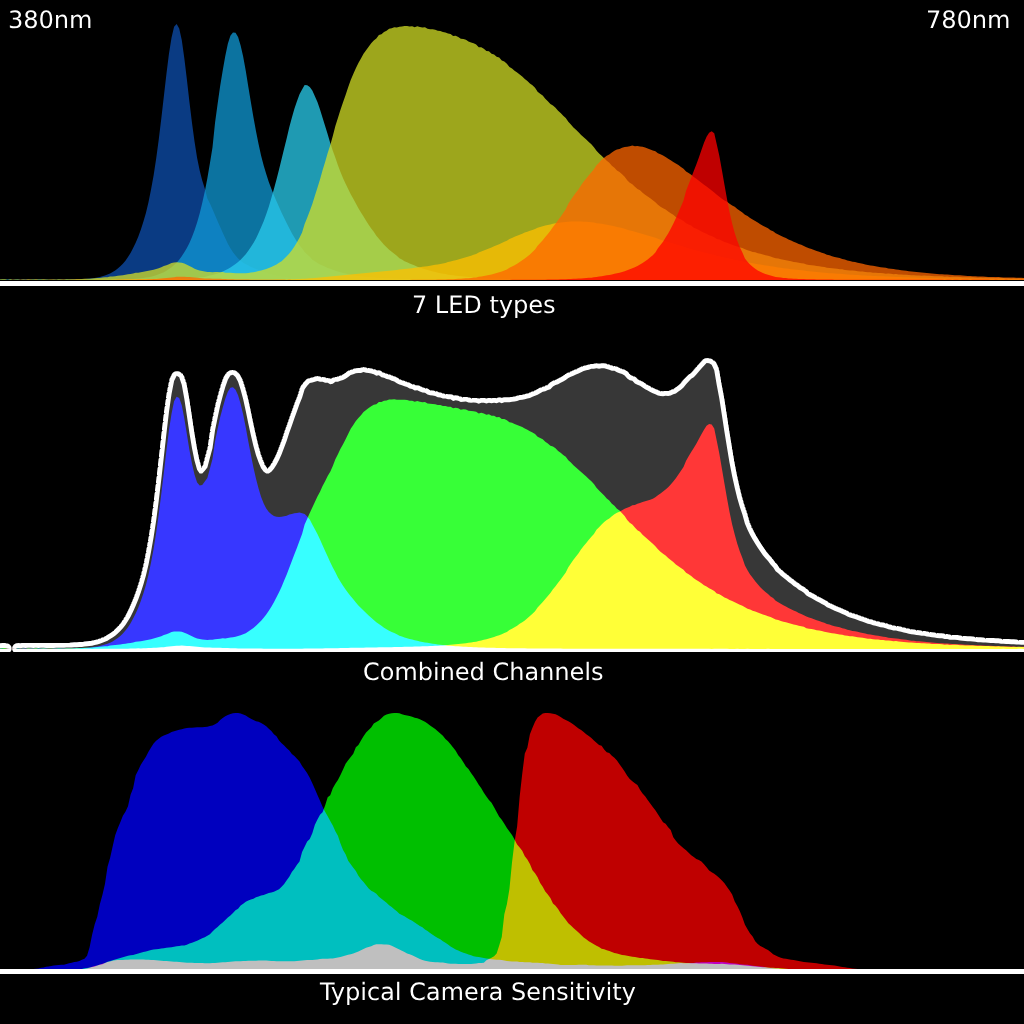
<style>
.page{position:relative;width:1024px;height:1024px;background:#000000}
.page>*{position:absolute;margin:0}
.t1{font:24px "DejaVuSans";color:#ffffff}
</style>
<div class="page">
<p class="t1" style="left:9px;top:10px;width:82px;height:19px">380nm</p>
<p class="t1" style="left:928px;top:10px;width:81px;height:19px">780nm</p>
<p class="t1" style="left:413px;top:295px;width:142px;height:23px">7 LED types</p>
<p class="t1" style="left:364px;top:661px;width:239px;height:20px">Combined Channels</p>
<p class="t1" style="left:319px;top:981px;width:317px;height:24px">Typical Camera Sensitivity</p>
</div>
